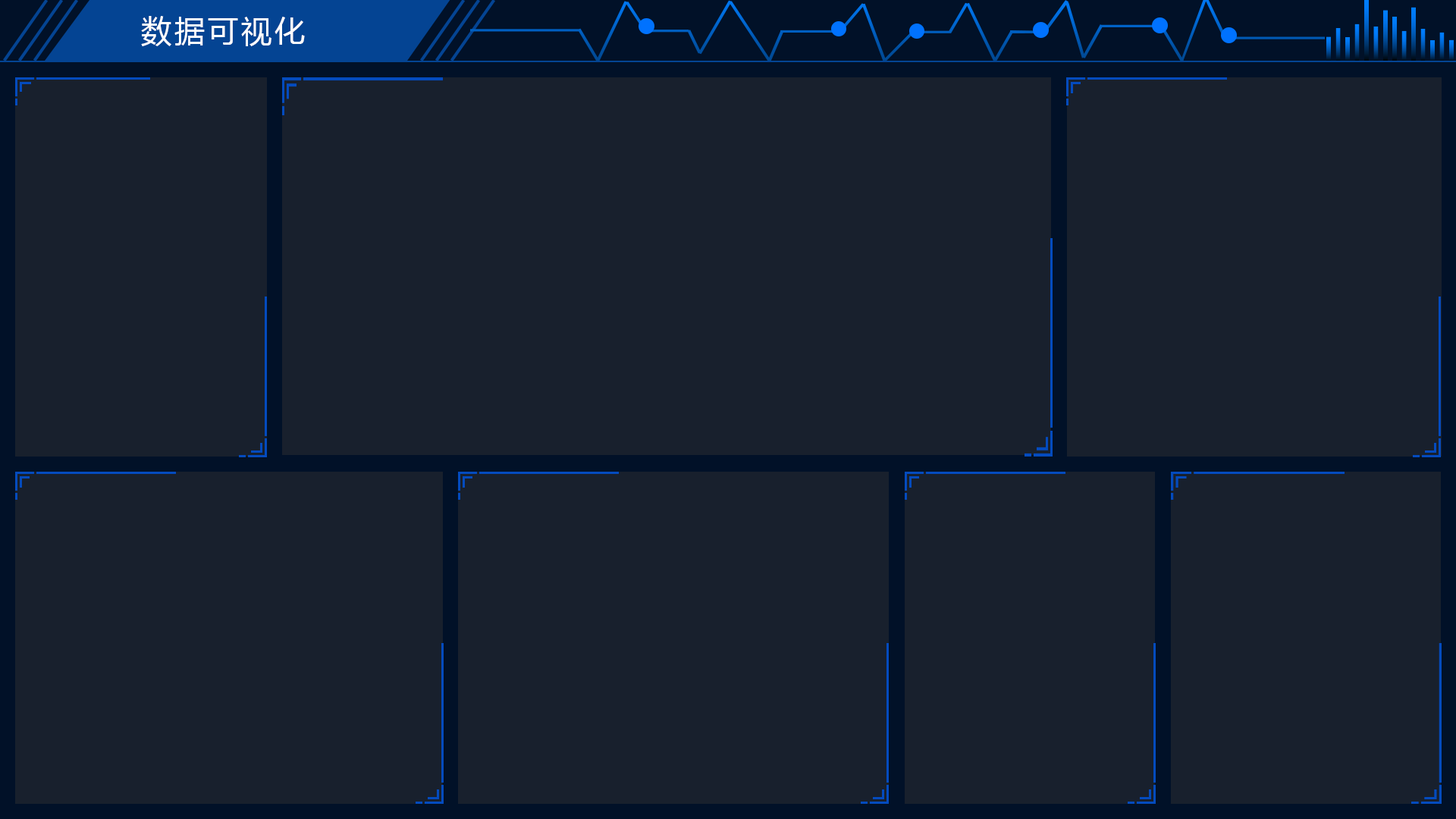
<style>
.page{position:relative;width:1456px;height:819px;background:#18202d}
.page>*{position:absolute;margin:0}
.t1{font:30.3px "MicrosoftYaHei";letter-spacing:0.1em;color:#fffefe}
</style>
<div class="page">
<p class="t1" style="left:141px;top:16px;width:164px;height:30px">数据可视化</p>
</div>
